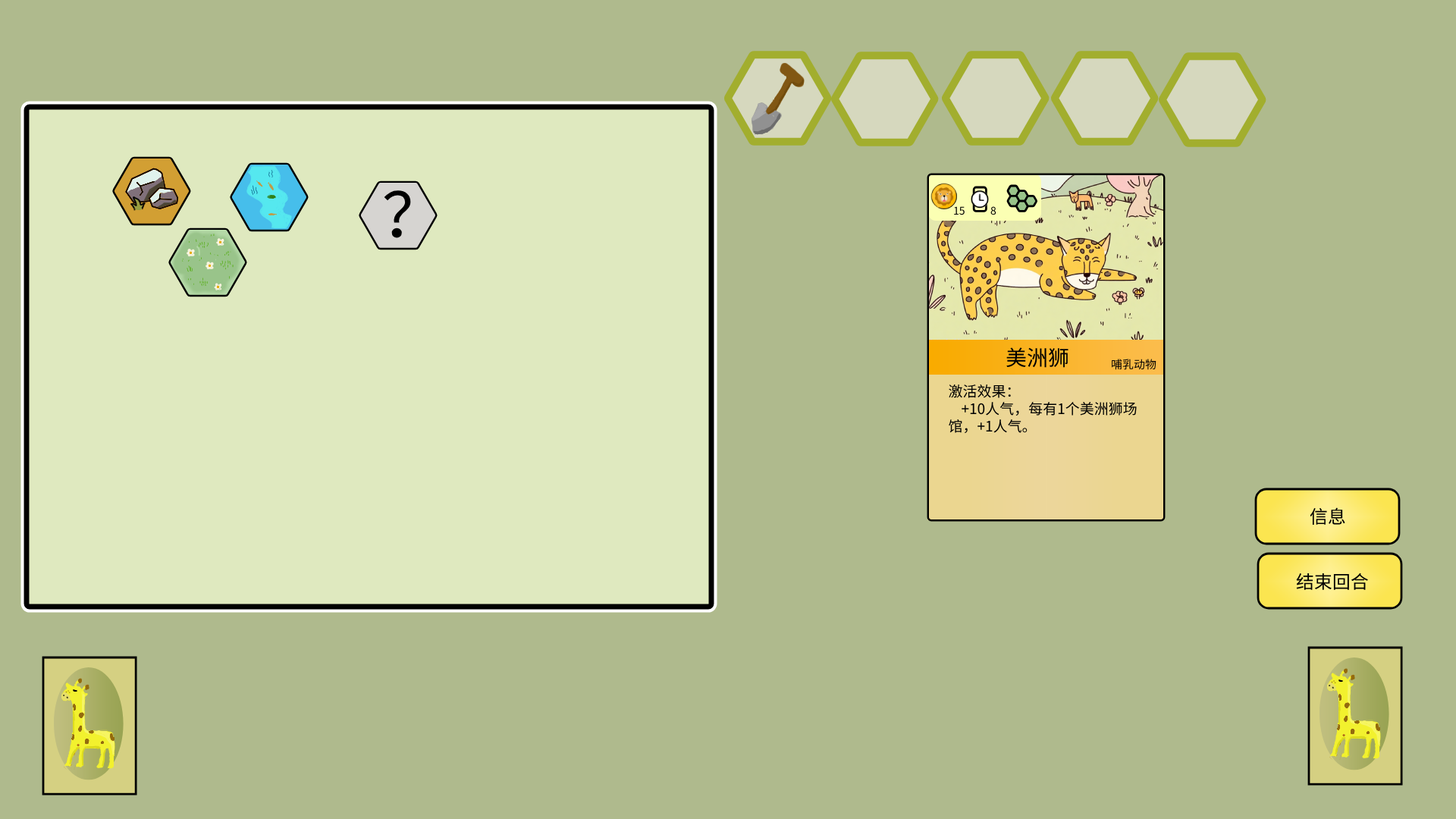
<style>
.page{position:relative;width:1456px;height:819px;background:#afba8d}
.page>*{position:absolute;margin:0}
.t1{font:61.4px "DejaVuSans";color:#000000}
.t2{font:10.6px "DejaVuSans";color:#000000}
.t3{font:21.2px "DejaVuSans";color:#000000}
.t4{font:11.4px "DejaVuSans";color:#000000}
.t5{font:14.4px "DejaVuSans";color:#000000}
.t6{font:18.2px "DejaVuSans";color:#000000}
</style>
<div class="page">
<p class="t1" style="left:384px;top:190px;width:27px;height:48px">？</p>
<p class="t2" style="left:954px;top:206px;width:11px;height:9px">15</p>
<p class="t2" style="left:990px;top:206px;width:6px;height:9px">8</p>
<p class="t3" style="left:1006px;top:347px;width:62px;height:21px">美洲狮</p>
<p class="t4" style="left:1112px;top:359px;width:44px;height:11px">哺乳动物</p>
<p class="t5" style="left:949px;top:384px;width:188px;height:49px">激活效果：<br>    +10人气，每有1个美洲狮场<br>馆，+1人气。</p>
<p class="t6" style="left:1310px;top:507px;width:35px;height:18px">信息</p>
<p class="t6" style="left:1296px;top:573px;width:72px;height:17px">结束回合</p>
</div>
